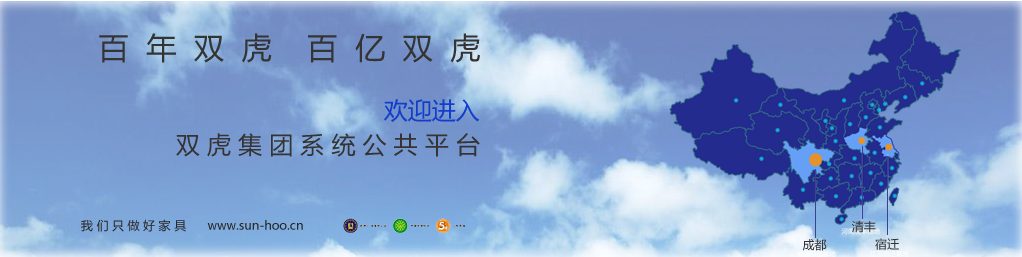
<style>
.page{position:relative;width:1022px;height:257px}
.page>*{position:absolute;margin:0}
.t1{font:30px "MicrosoftYaHei";color:#353434}
.t2{font:24px "MicrosoftYaHei";color:#133ecb}
.t3{font:24px "MicrosoftYaHei";color:#353333}
.t4{font:12px "MicrosoftYaHei";color:#282727}
.t5{font:12px "MicrosoftYaHei";color:#343232}
</style>
<div class="page">
<p class="t1" style="left:99px;top:33px;width:381px;height:30px">百  年  双  虎    百  亿  双  虎</p>
<p class="t2" style="left:384px;top:99px;width:96px;height:23px">欢迎进入</p>
<p class="t3" style="left:176px;top:133px;width:304px;height:24px">双 虎 集 团 系 统 公 共 平 台</p>
<p class="t4" style="left:81px;top:219px;width:222px;height:13px">我 们 只 做 好 家 具      www.sun-hoo.cn</p>
<p class="t5" style="left:851px;top:220px;width:25px;height:13px">清丰</p>
<p class="t5" style="left:802px;top:239px;width:25px;height:12px">成都</p>
<p class="t5" style="left:875px;top:238px;width:24px;height:12px">宿迁</p>
</div>
